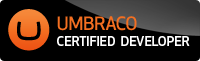
<style>
.page{position:relative;width:200px;height:61px;background:#000000}
.page>*{position:absolute;margin:0}
.t1{font:18.2px "ApexNew-Medium";color:#f36f21;text-transform:uppercase}
.t2{font:18.2px "ApexNew-Medium";letter-spacing:-0.01em;color:#f36f21;text-transform:uppercase}
.t3{font:18.2px "ApexNew-Medium";letter-spacing:-0.05em;color:#f36f21;text-transform:uppercase}
.t4{font:13.1px "ApexNew-Medium";color:#ffffff;text-transform:uppercase}
.t5{font:13.1px "ApexNew-Medium";letter-spacing:-0.02em;color:#ffffff;text-transform:uppercase}
.t6{font:13.1px "ApexNew-Medium";letter-spacing:-0.03em;color:#ffffff;text-transform:uppercase}
.t7{font:13.1px "ApexNew-Medium";letter-spacing:0.005em;color:#ffffff;text-transform:uppercase}
</style>
<div class="page">
<p class="t1" style="left:57px;top:16px;width:80px;height:15px">umb<span class="t2">r</span><span class="t3">ac</span>o</p>
<p class="t4" style="left:57px;top:36px;width:133px;height:10px">Certi<span class="t5">f</span><span class="t6">i</span>ed  de<span class="t6">v</span><span class="t7">e</span>loper</p>
</div>
